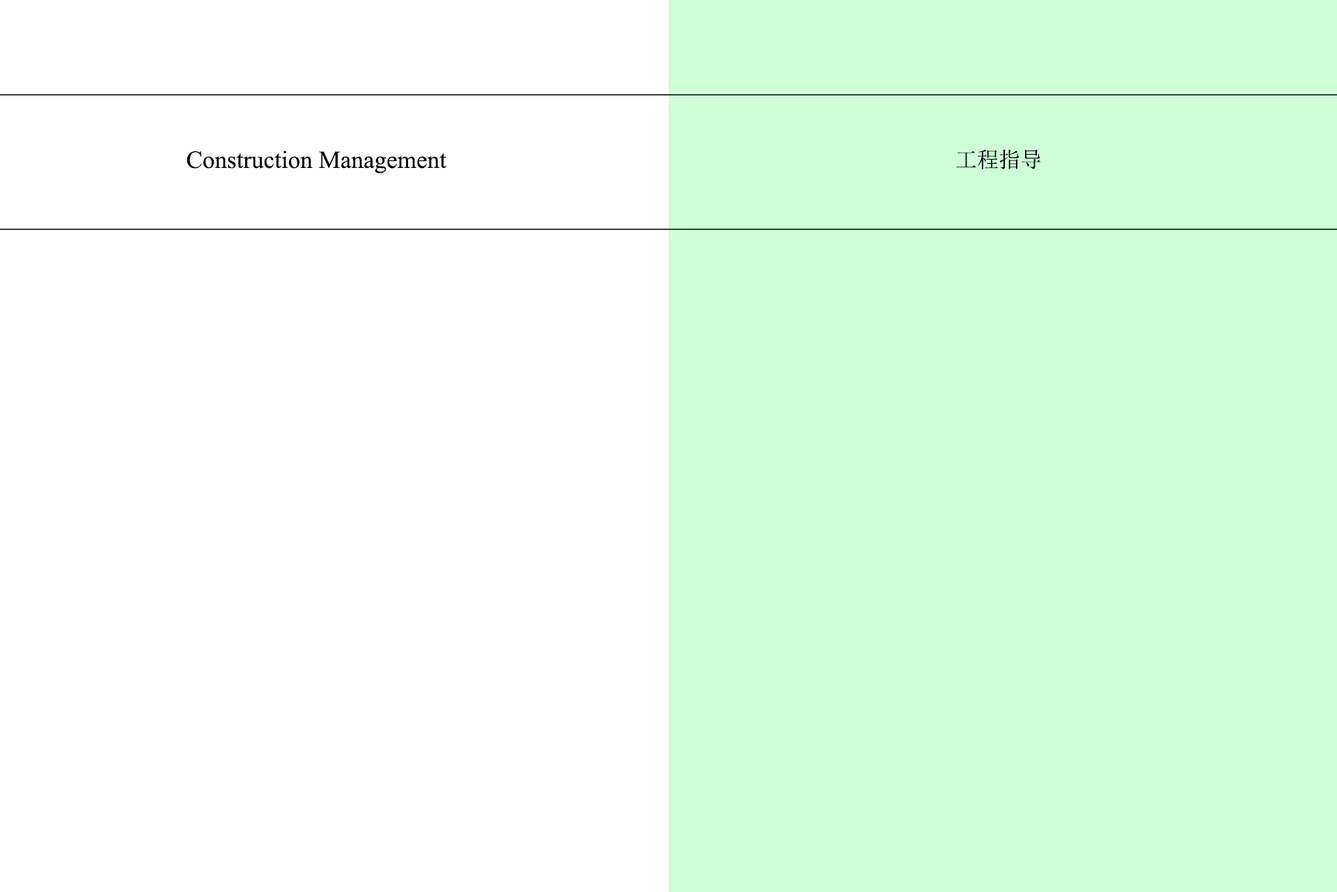
<style>
.page{position:relative;width:1337px;height:892px;background:#ceffd7}
.page>*{position:absolute;margin:0}
.t1{font:21.7px "SimSun";color:#000000}
.t2{font:24.5px "TimesNewRomanPSMT";color:#000000}
</style>
<div class="page">
<p class="t1" style="left:956px;top:149px;width:85px;height:20px">工程指导</p>
<p class="t2" style="left:187px;top:150px;width:259px;height:23px">Construction Management</p>
</div>
